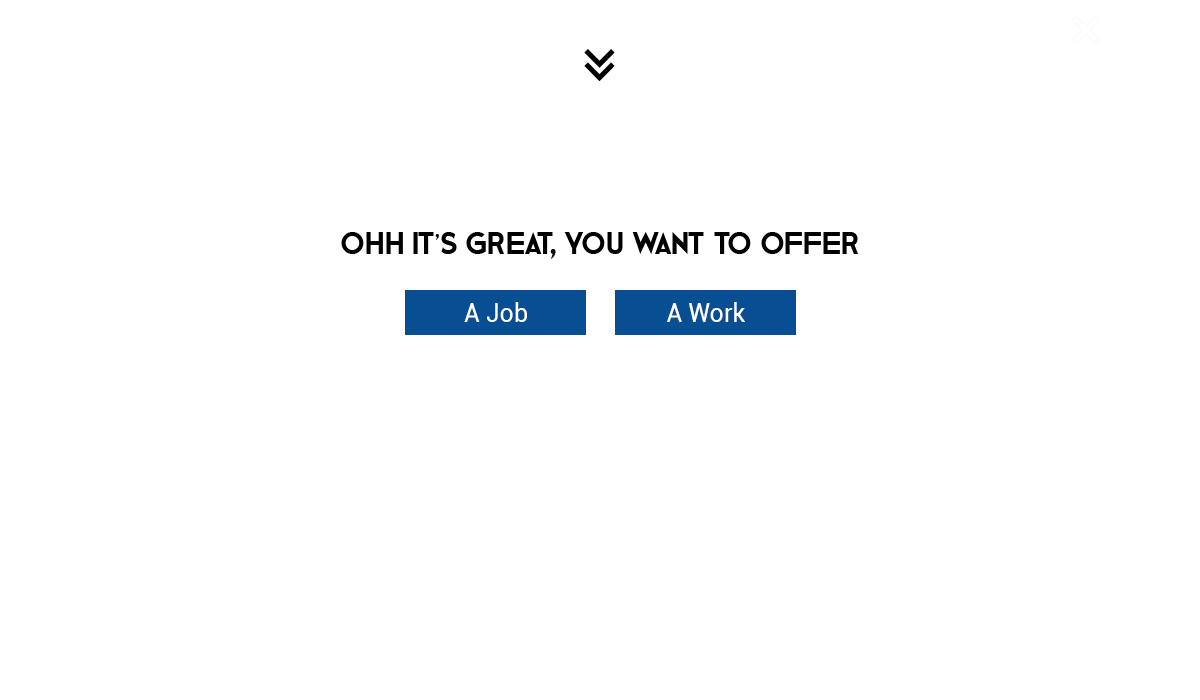
<style>
.page{position:relative;width:1200px;height:700px;background:#ffffff}
.page>*{position:absolute;margin:0}
.t1{font:32px "GeBody";color:#000000}
.t2{font:25px "Roboto-Regular";color:#ffffff}
</style>
<div class="page">
<p class="t1" style="left:341px;top:232px;width:517px;height:27px">Ohh it’s great, You want to offer</p>
<p class="t2" style="left:464px;top:302px;width:63px;height:20px">A Job</p>
<p class="t2" style="left:667px;top:302px;width:78px;height:20px">A Work</p>
</div>
